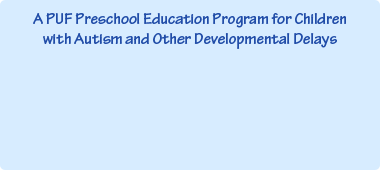
<style>
.page{position:relative;width:380px;height:170px;background:#d7ecff}
.page>*{position:absolute;margin:0}
.t1{font:16px/20px "TektonPro-Bold";color:#214da8}
</style>
<div class="page">
<p class="t1" style="left:33px;top:13px;width:313px;height:36px;text-align:center">A PUF Preschool Education Program for Children<br>with Autism and Other Developmental Delays</p>
</div>
